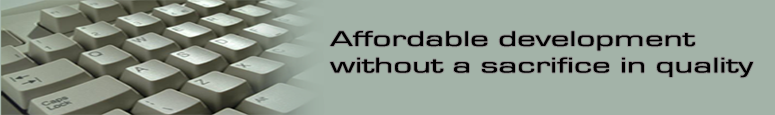
<style>
.page{position:relative;width:775px;height:115px;background:#a3b3a8}
.page>*{position:absolute;margin:0}
.t1{font:22.1px "EurostileRegular";color:#000000;scale:1.68 1}
</style>
<div class="page">
<p class="t1" style="left:330px;top:31px;width:423px;height:47px">Affordable development<br>without a sacrifice in quality</p>
</div>
